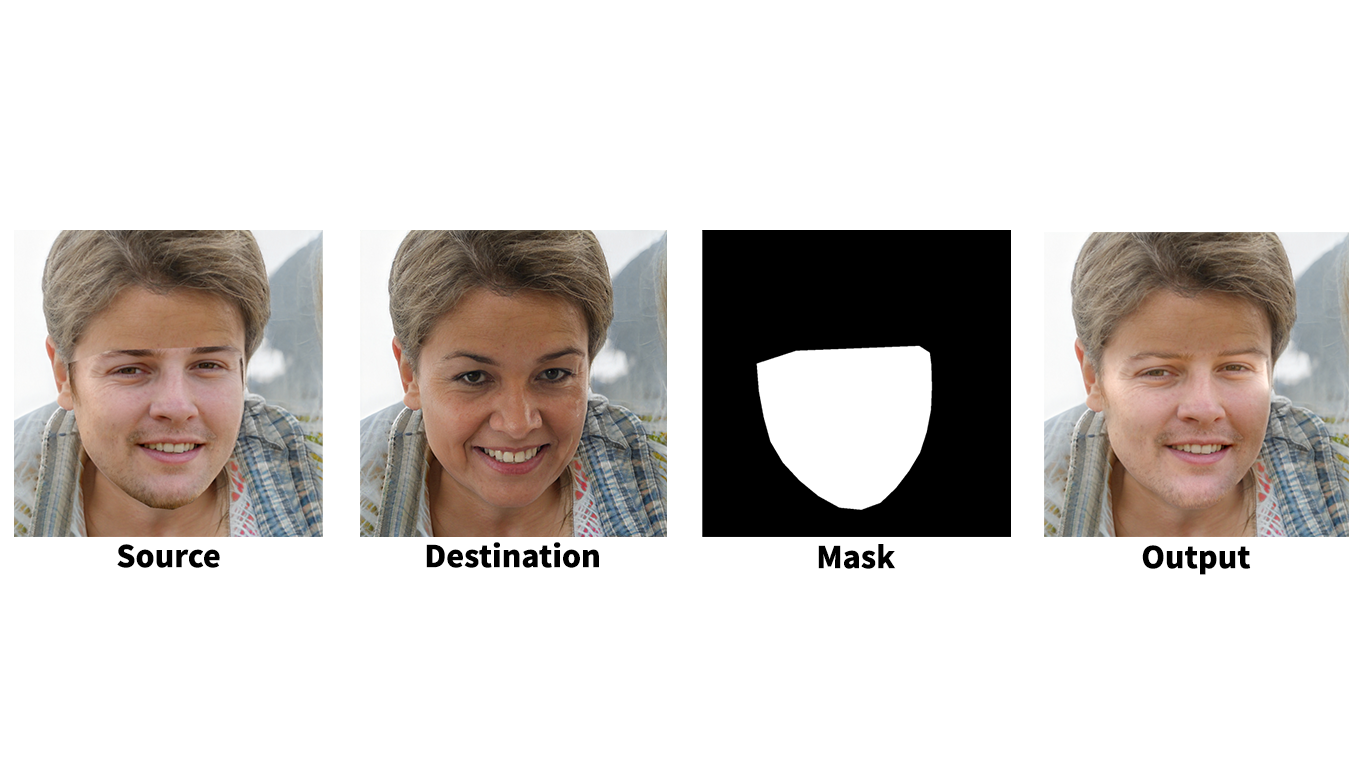
<style>
.page{position:relative;width:1366px;height:768px;background:#ffffff}
.page>*{position:absolute;margin:0}
.t1{font:30px "NotoSansCJKtc-Black";color:#000000}
</style>
<div class="page">
<p class="t1" style="left:117px;top:544px;width:103px;height:24px">Source</p>
<p class="t1" style="left:426px;top:542px;width:173px;height:26px">Destination</p>
<p class="t1" style="left:818px;top:544px;width:78px;height:25px">Mask</p>
<p class="t1" style="left:1142px;top:545px;width:109px;height:30px">Output</p>
</div>
